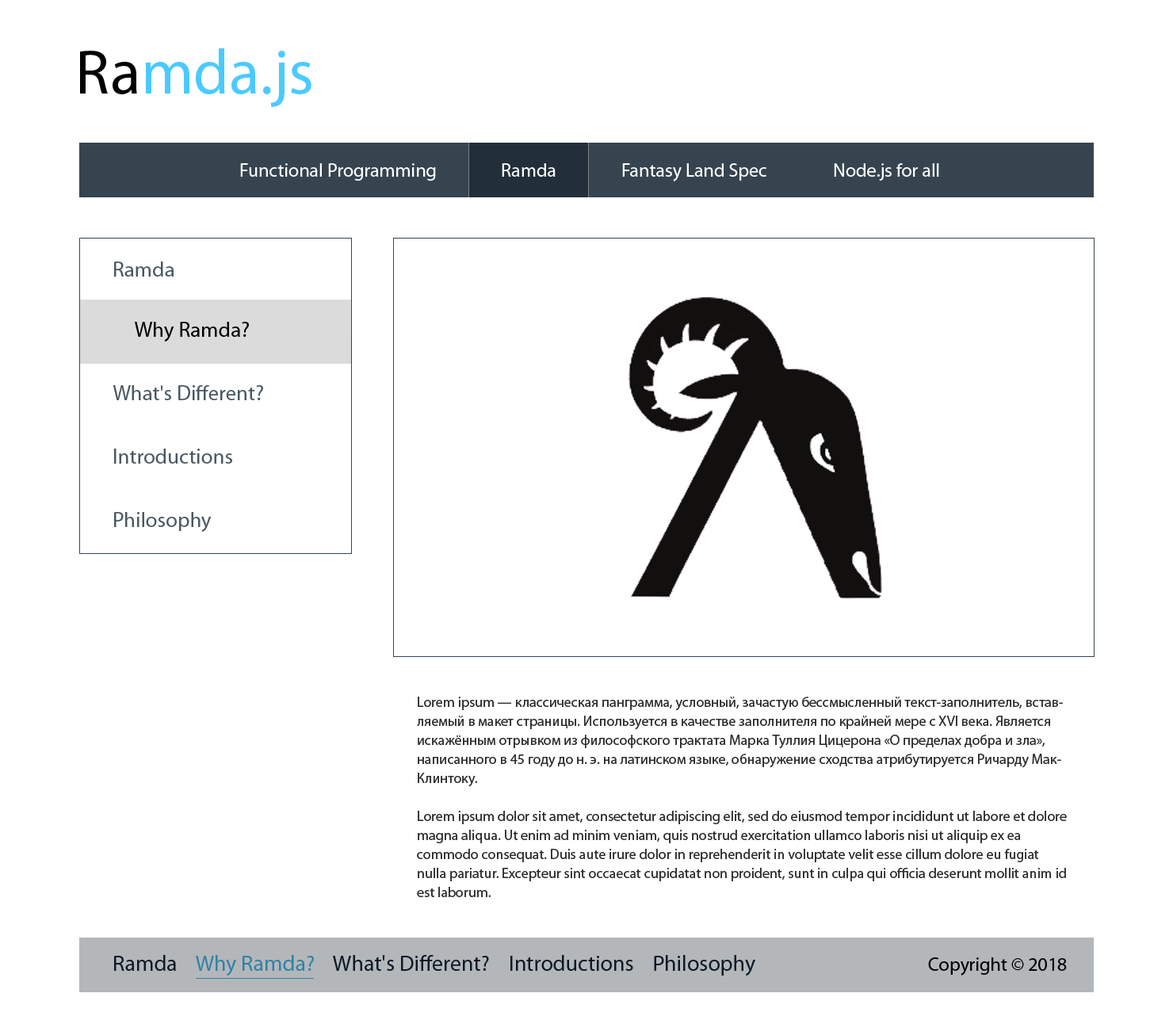
<style>
.page{position:relative;width:1173px;height:1016px;background:#ffffff}
.page>*{position:absolute;margin:0}
.t1{font:63.4px "MyriadPro-Regular";color:#4bcaff}
.t2{font:63.4px "MyriadPro-Regular";color:#000000}
.t3{font:19px "MyriadPro-Regular";color:#ffffff}
.t4{font:21.4px "MyriadPro-Regular";color:#485863}
.t5{font:21.4px "MyriadPro-Regular";color:#000000}
.t6{font:21.4px "MyriadPro-Regular";color:#35444f}
.t7{font:21.4px "MyriadPro-Regular";color:#495863}
.t8{font:14.3px/19px "MyriadPro-Regular";color:#2c2c2c}
.t9{font:22.2px "MyriadPro-Regular";color:#0c1927}
.t10{font:22.2px "MyriadPro-Regular";color:#3181a6}
.t11{font:19px "MyriadPro-Regular";color:#010101}
</style>
<div class="page">
<p class="t1" style="left:80px;top:48px;width:232px;height:59px"><span class="t2">Ra</span>mda.js</p>
<p class="t3" style="left:240px;top:163px;width:196px;height:18px">Functional Programming</p>
<p class="t3" style="left:502px;top:163px;width:54px;height:14px">Ramda</p>
<p class="t3" style="left:622px;top:163px;width:145px;height:19px">Fantasy Land Spec</p>
<p class="t3" style="left:834px;top:163px;width:105px;height:18px">Node.js for all</p>
<p class="t4" style="left:114px;top:262px;width:60px;height:15px">Ramda</p>
<p class="t5" style="left:135px;top:322px;width:114px;height:20px"><span class="t6">     </span>Why Ramda?</p>
<p class="t7" style="left:113px;top:385px;width:150px;height:15px">What's Different?</p>
<p class="t7" style="left:114px;top:449px;width:118px;height:15px">Introductions</p>
<p class="t7" style="left:114px;top:512px;width:98px;height:20px">Philosophy</p>
<p class="t8" style="left:417px;top:697px;width:646px;height:90px">Lorem ipsum — классическая панграмма, условный, зачастую бессмысленный текст-заполнитель, вставляемый в макет страницы. Используется в качестве заполнителя по крайней мере с XVI века. Является искажённым отрывком из философского трактата Марка Туллия Цицерона «О пределах добра и зла», написанного в 45 году до н. э. на латинском языке, обнаружение сходства атрибутируется Ричарду МакКлинтоку.</p>
<p class="t8" style="left:417px;top:811px;width:650px;height:86px">Lorem ipsum dolor sit amet, consectetur adipiscing elit, sed do eiusmod tempor incididunt ut labore et dolore magna aliqua. Ut enim ad minim veniam, quis nostrud exercitation ullamco laboris nisi ut aliquip ex ea commodo consequat. Duis aute irure dolor in reprehenderit in voluptate velit esse cillum dolore eu fugiat nulla pariatur. Excepteur sint occaecat cupidatat non proident, sunt in culpa qui officia deserunt mollit anim id est laborum.</p>
<p class="t9" style="left:114px;top:955px;width:642px;height:21px">Ramda    <span class="t10">Why Ramda?</span>    What's Different?    Introductions    Philosophy</p>
<p class="t11" style="left:928px;top:958px;width:139px;height:18px">Copyright © 2018</p>
</div>
